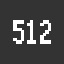
<style>
.page{position:relative;width:64px;height:64px;background:#333333}
.page>*{position:absolute;margin:0}
.t1{font:40.9px "Glasstown-NBP";letter-spacing:0.005em;color:#ffffff;font-weight:bold}
</style>
<div class="page">
<p class="t1" style="left:13px;top:20px;width:38px;height:24px">512</p>
</div>
